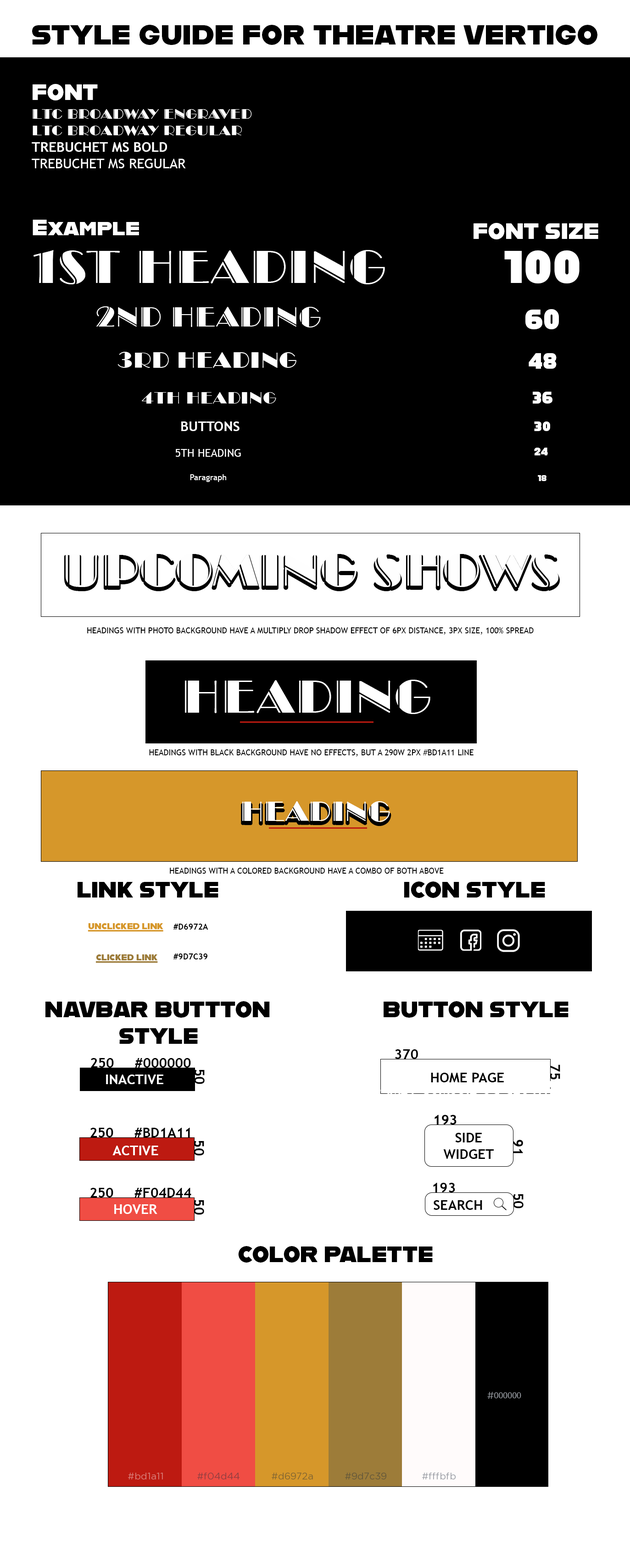
<style>
.page{position:relative;width:630px;height:1568px;background:#ffffff}
.page>*{position:absolute;margin:0}
.t1{font:27.5px "Alfarn";color:#000000;text-transform:uppercase}
.t2{font:22px "Alfarn";color:#ffffff;text-transform:uppercase}
.t3{font:13.8px "LTCBroadway-Engraved";color:#ffffff;text-transform:uppercase}
.t4{font:13.8px "LTCBroadway-Regular";color:#ffffff;text-transform:uppercase}
.t5{font:13.8px "TrebuchetMS-Bold";color:#ffffff;text-transform:uppercase}
.t6{font:13.8px "TrebuchetMS";color:#ffffff;text-transform:uppercase}
.t7{font:22px "Alfarn";color:#ffffff}
.t8{font:45.9px "LTCBroadway-Engraved";color:#ffffff;text-transform:uppercase}
.t9{font:45.9px "Alfarn";color:#ffffff;text-transform:uppercase}
.t10{font:27.5px "LTCBroadway-Engraved";color:#ffffff;text-transform:uppercase}
.t11{font:27.5px "Alfarn";color:#ffffff;text-transform:uppercase}
.t12{font:22px "LTCBroadway-Regular";color:#ffffff;text-transform:uppercase}
.t13{font:16.5px "LTCBroadway-Regular";color:#ffffff;text-transform:uppercase}
.t14{font:16.5px "Alfarn";color:#ffffff;text-transform:uppercase}
.t15{font:13.8px "Alfarn";color:#ffffff}
.t16{font:11px "TrebuchetMS";color:#ffffff;text-transform:uppercase}
.t17{font:11px "Alfarn";color:#ffffff;text-transform:uppercase}
.t18{font:8.3px "TrebuchetMS";color:#ffffff}
.t19{font:8.3px "Alfarn";color:#ffffff;text-transform:uppercase}
.t20{font:45.9px "LTCBroadway-Engraved";color:#fefefe;text-transform:uppercase}
.t21{font:8.3px "TrebuchetMS";color:#000000;text-transform:uppercase}
.t22{font:22px "Alfarn";color:#000000;text-transform:uppercase}
.t23{font:8.3px "Alfarn";color:#d6972a;text-transform:uppercase;text-decoration:underline}
.t24{font:8.3px "TrebuchetMS-Bold";color:#000000;text-transform:uppercase}
.t25{font:8.3px "Alfarn";color:#9d7c39;text-transform:uppercase;text-decoration:underline}
.t26{font:13.8px "TrebuchetMS-Bold";color:#000000;text-transform:uppercase}
.t27{font:13.8px "TrebuchetMS-Bold";color:#000000}
.t28{font:7.8px "EuphemiaUCAS";color:#9da1a7;text-transform:uppercase}
</style>
<div class="page">
<p class="t1" style="left:32px;top:25px;width:565px;height:20px">Style Guide For Theatre Vertigo</p>
<p class="t2" style="left:33px;top:84px;width:65px;height:16px">Font</p>
<p class="t3" style="left:32px;top:109px;width:220px;height:59px">LTC BROADWAY ENGRAVED<br><span class="t4">LTC BROADWAY REGULAR<br></span><span class="t5">TREBUCHET MS BOLD<br></span><span class="t6">TREBUCHET MS REGULAR</span></p>
<p class="t7" style="left:33px;top:220px;width:106px;height:15px">Example</p>
<p class="t2" style="left:473px;top:223px;width:125px;height:16px">FONT SIZE</p>
<p class="t8" style="left:33px;top:250px;width:352px;height:34px">1st Heading</p>
<p class="t9" style="left:504px;top:250px;width:75px;height:33px">100</p>
<p class="t10" style="left:96px;top:306px;width:225px;height:21px">2nd Heading</p>
<p class="t11" style="left:525px;top:309px;width:34px;height:20px">60</p>
<p class="t12" style="left:117px;top:352px;width:179px;height:16px">3rd Heading</p>
<p class="t2" style="left:528px;top:353px;width:28px;height:16px">48</p>
<p class="t13" style="left:142px;top:392px;width:134px;height:12px">4th Heading</p>
<p class="t14" style="left:532px;top:392px;width:20px;height:12px">36</p>
<p class="t5" style="left:181px;top:421px;width:58px;height:10px">Buttons</p>
<p class="t15" style="left:534px;top:421px;width:16px;height:10px">30</p>
<p class="t16" style="left:176px;top:449px;width:65px;height:8px">5Th Heading</p>
<p class="t17" style="left:534px;top:448px;width:14px;height:7px">24</p>
<p class="t18" style="left:190px;top:474px;width:36px;height:8px">Paragraph</p>
<p class="t19" style="left:537px;top:475px;width:9px;height:6px">18</p>
<p class="t20" style="left:66px;top:553px;width:492px;height:34px">Upcoming Shows</p>
<p class="t21" style="left:87px;top:627px;width:446px;height:8px">HeadiNgs with photo background have a Multiply drop shadow effect of 6px Distance, 3px size, 100% spread</p>
<p class="t8" style="left:185px;top:680px;width:245px;height:34px">Heading</p>
<p class="t21" style="left:149px;top:749px;width:324px;height:8px">Headings with black background have no effects, but a 290W 2px #bd1a11 line</p>
<p class="t10" style="left:242px;top:801px;width:148px;height:21px">Heading</p>
<p class="t21" style="left:170px;top:868px;width:273px;height:6px">Headings with a colored background have a combo of both above</p>
<p class="t22" style="left:78px;top:882px;width:140px;height:16px">Link Style</p>
<p class="t22" style="left:404px;top:881px;width:141px;height:17px">Icon Style</p>
<p class="t23" style="left:88px;top:923px;width:75px;height:9px">Unclicked link</p>
<p class="t24" style="left:173px;top:924px;width:35px;height:35px">#d6972a<br><br><br>#9d7c39</p>
<p class="t25" style="left:95px;top:954px;width:63px;height:9px">Clicked link</p>
<p class="t22" style="left:45px;top:1001px;width:225px;height:43px">Navbar buttton<br>Style</p>
<p class="t22" style="left:383px;top:1001px;width:185px;height:17px">Button style</p>
<p class="t26" style="left:431px;top:1073px;width:73px;height:9px">Home Page<br>Button</p>
<p class="t5" style="left:106px;top:1075px;width:57px;height:9px">inActive page</p>
<p class="t26" style="left:90px;top:1128px;width:114px;height:28px">250     #bd1a11 50</p>
<p class="t26" style="left:443px;top:1133px;width:50px;height:26px;text-align:center">Side<br>widget</p>
<p class="t5" style="left:112px;top:1146px;width:46px;height:9px">Active page</p>
<p class="t26" style="left:90px;top:1188px;width:114px;height:27px">250     #f04d44 50</p>
<p class="t27" style="left:433px;top:1183px;width:90px;height:25px">193              50</p>
<p class="t5" style="left:114px;top:1204px;width:43px;height:10px">Hover</p>
<p class="t26" style="left:433px;top:1200px;width:49px;height:10px">Search</p>
<p class="t22" style="left:238px;top:1246px;width:194px;height:17px">Color Palette</p>
<p class="t28" style="left:487px;top:1392px;width:34px;height:7px">#000000</p>
</div>
